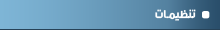
<style>
.page{position:relative;width:220px;height:30px}
.page>*{position:absolute;margin:0}
.t1{font:12px "Mj_Flow-Bold";color:#e7e7e7}
</style>
<div class="page">
<p class="t1" style="left:155px;top:9px;width:41px;height:12px">تنظیمـات</p>
</div>
